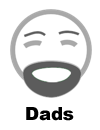
<style>
.page{position:relative;width:100px;height:130px;background:#ffffff}
.page>*{position:absolute;margin:0}
.t1{font:17.9px "Arial-Black";color:#000000}
</style>
<div class="page">
<p class="t1" style="left:26px;top:107px;width:48px;height:14px">Dads</p>
</div>
